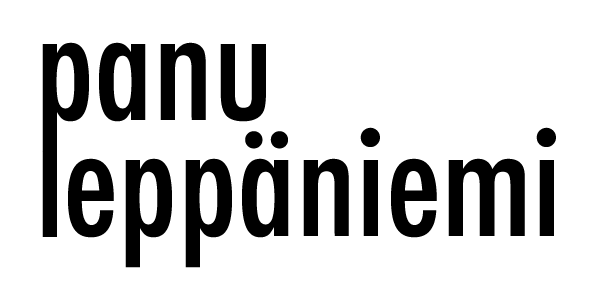
<style>
.page{position:relative;width:600px;height:303px;background:#ffffff}
.page>*{position:absolute;margin:0}
.t1{font:150px "Futura-CondensedMedium";color:#000000}
.t2{font:103.5px "Futura-CondensedMedium";color:#000000;scale:1.45 1}
</style>
<div class="page">
<p class="t1" style="left:42px;top:42px;width:224px;height:110px">panu</p>
<p class="t1" style="left:68px;top:127px;width:488px;height:141px">eppäniemi</p>
<p class="t2" style="left:42px;top:151px;width:15px;height:86px">l</p>
</div>
